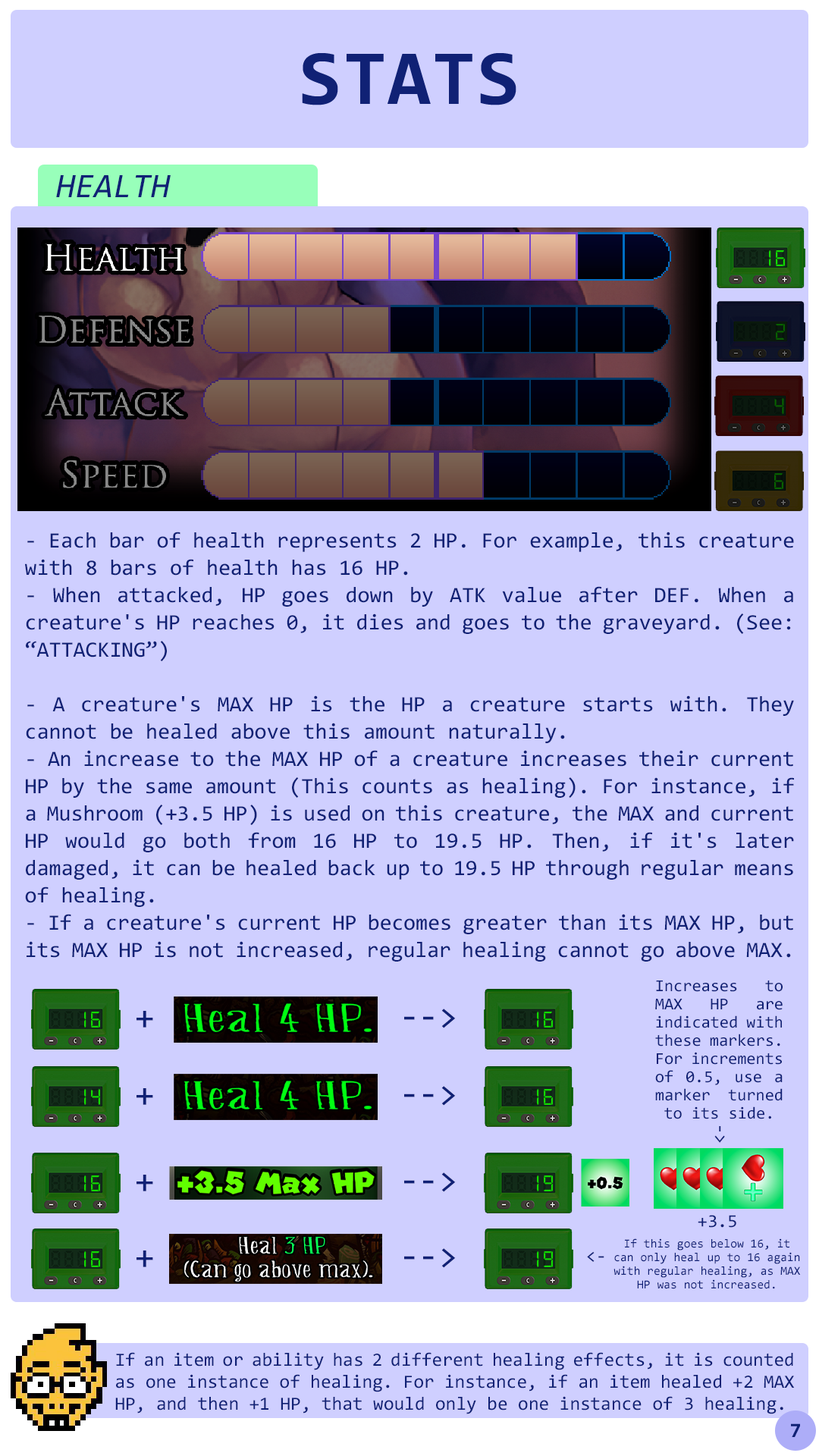
<style>
.page{position:relative;width:819px;height:1456px;background:#cfcfff}
.page>*{position:absolute;margin:0}
.t1{font:78.3px "Consolas-Bold";letter-spacing:0.02em;color:#102175}
.t2{font:34.3px "Consolas-Italic";color:#102175}
.t3{font:24.4px "Digital-7";letter-spacing:0.12em;color:#12dc01}
.t4{font:24.4px "Digital-7";letter-spacing:0.12em;color:#086100}
.t5{font:22px/27.3px "Consolas";color:#102175}
.t6{font:16.8px/18.2px "Consolas";color:#102175}
.t7{font:34.9px "Consolas";color:#102175}
.t8{font:18.1px "Consolas";color:#102175}
.t9{font:12.1px/13.6px "Consolas";color:#102175}
.t10{font:18.8px/22px "Consolas";color:#102175}
.t11{font:20.5px "Consolas-Bold";letter-spacing:-0.06em;color:#102175}
</style>
<div class="page">
<p class="t1" style="left:302px;top:53px;width:214px;height:52px">STATS</p>
<p class="t2" style="left:56px;top:175px;width:115px;height:22px">HEALTH</p>
<p class="t3" style="left:769px;top:250px;width:16px;height:16px">16</p>
<p class="t4" style="left:776px;top:324px;width:9px;height:16px">2</p>
<p class="t4" style="left:774px;top:398px;width:10px;height:16px">4</p>
<p class="t4" style="left:774px;top:473px;width:9px;height:16px">6</p>
<p class="t5" style="left:25px;top:532px;width:769px;height:430px;text-align:justify">- Each bar of health represents 2 HP. For example, this creature with 8 bars of health has 16 HP.<br>- When attacked, HP goes down by ATK value after DEF. When a creature's HP reaches 0, it dies and goes to the graveyard. (See: “ATTACKING”)<br><br>- A creature's MAX HP is the HP a creature starts with. They cannot be healed above this amount naturally. <br>- An increase to the MAX HP of a creature increases their current HP by the same amount (This counts as healing). For instance, if a Mushroom (+3.5 HP) is used on this creature, the MAX and current HP would go both from 16 HP to 19.5 HP. Then, if it's later damaged, it can be healed back up to 19.5 HP through regular means of healing. <br>- If a creature's current HP becomes greater than its MAX HP, but its MAX HP is not increased, regular healing cannot go above MAX.</p>
<p class="t6" style="left:655px;top:980px;width:128px;height:139px;text-align:justify">Increases to MAX HP are indicated with these markers. For increments of 0.5, use a marker turned to its side.</p>
<p class="t3" style="left:84px;top:1012px;width:16px;height:16px">16</p>
<p class="t7" style="left:136px;top:1011px;width:17px;height:17px">+</p>
<p class="t7" style="left:404px;top:1009px;width:52px;height:19px">--&gt;</p>
<p class="t3" style="left:537px;top:1012px;width:16px;height:16px">16</p>
<p class="t7" style="left:404px;top:1086px;width:52px;height:20px">--&gt;</p>
<p class="t3" style="left:84px;top:1089px;width:16px;height:16px">14</p>
<p class="t7" style="left:136px;top:1088px;width:17px;height:17px">+</p>
<p class="t3" style="left:537px;top:1089px;width:16px;height:16px">16</p>
<p class="t8" style="left:714px;top:1126px;width:11px;height:17px;rotate:90deg">-&gt;</p>
<p class="t3" style="left:84px;top:1175px;width:16px;height:16px">16</p>
<p class="t7" style="left:136px;top:1175px;width:17px;height:16px">+</p>
<p class="t7" style="left:404px;top:1172px;width:52px;height:20px">--&gt;</p>
<p class="t3" style="left:537px;top:1175px;width:16px;height:16px">19</p>
<p class="t8" style="left:698px;top:1215px;width:38px;height:13px">+3.5</p>
<p class="t9" style="left:613px;top:1238px;width:188px;height:51px;text-align:center">If this goes below 16, it can only heal up to 16 again with regular healing, as MAX HP was not increased.</p>
<p class="t3" style="left:84px;top:1251px;width:16px;height:16px">16</p>
<p class="t7" style="left:136px;top:1250px;width:17px;height:17px">+</p>
<p class="t7" style="left:404px;top:1248px;width:52px;height:20px">--&gt;</p>
<p class="t3" style="left:537px;top:1251px;width:16px;height:16px">19</p>
<p class="t8" style="left:587px;top:1251px;width:17px;height:11px;rotate:180deg">-&gt;</p>
<p class="t10" style="left:115px;top:1352px;width:680px;height:62px;text-align:justify">If an item or ability has 2 different healing effects, it is counted as one instance of healing. For instance, if an item healed +2 MAX HP, and then +1 HP, that would only be one instance of 3 healing.</p>
<p class="t11" style="left:791px;top:1423px;width:9px;height:14px">7</p>
</div>
